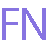
<style>
.page{position:relative;width:48px;height:48px;background:#ffffff}
.page>*{position:absolute;margin:0}
.t1{font:47px "MyriadPro-Regular";letter-spacing:-0.025em;color:#8774e1}
</style>
<div class="page">
<p class="t1" style="left:2px;top:8px;width:44px;height:32px">FN</p>
</div>
